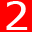
<style>
.page{position:relative;width:32px;height:32px;background:#ff0000}
.page>*{position:absolute;margin:0}
.t1{font:37.7px "Tahoma";color:#fffdfd;scale:1.21 1}
</style>
<div class="page">
<p class="t1" style="left:6px;top:1px;width:22px;height:29px">2</p>
</div>
